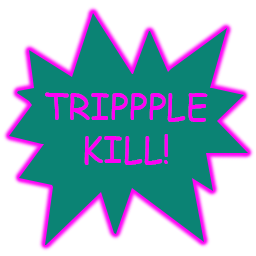
<style>
.page{position:relative;width:256px;height:256px;background:#0b8374}
.page>*{position:absolute;margin:0}
.t1{font:36px "ComicSansMS";color:#fe00f5}
</style>
<div class="page">
<p class="t1" style="left:45px;top:92px;width:163px;height:73px;text-align:center">TRIPPPLE<br>KILL!</p>
</div>
